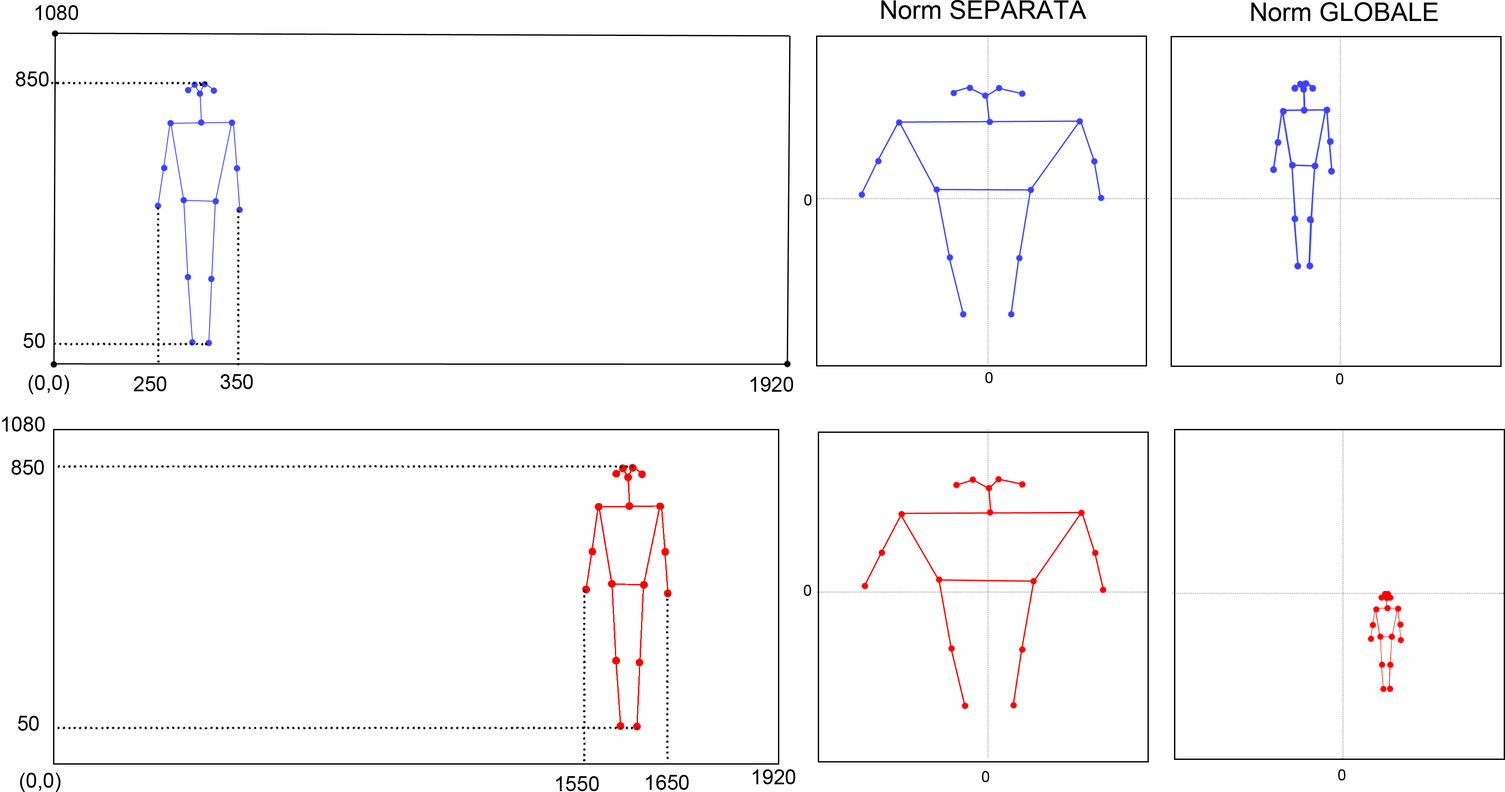
<style>
.page{position:relative;width:1505px;height:792px;background:#ffffff}
.page>*{position:absolute;margin:0}
.t1{font:20.6px "ArialMT";color:#000000}
.t2{font:25.7px "ArialMT";color:#000000}
.t3{font:15.4px "ArialMT";color:#000000}
</style>
<div class="page">
<p class="t1" style="left:36px;top:5px;width:42px;height:15px">1080</p>
<p class="t2" style="left:881px;top:0px;width:205px;height:19px">Norm SEPARATA</p>
<p class="t2" style="left:1251px;top:2px;width:187px;height:19px">Norm GLOBALE</p>
<p class="t1" style="left:16px;top:72px;width:33px;height:15px">850</p>
<p class="t3" style="left:804px;top:194px;width:8px;height:12px">0</p>
<p class="t1" style="left:24px;top:333px;width:21px;height:15px">50</p>
<p class="t1" style="left:29px;top:375px;width:40px;height:19px">(0,0)</p>
<p class="t1" style="left:134px;top:376px;width:33px;height:15px">250</p>
<p class="t1" style="left:221px;top:374px;width:32px;height:15px">350</p>
<p class="t1" style="left:751px;top:377px;width:42px;height:15px">1920</p>
<p class="t3" style="left:985px;top:372px;width:8px;height:11px">0</p>
<p class="t3" style="left:1336px;top:373px;width:8px;height:12px">0</p>
<p class="t1" style="left:2px;top:417px;width:43px;height:15px">1080</p>
<p class="t1" style="left:12px;top:460px;width:32px;height:15px">850</p>
<p class="t3" style="left:804px;top:585px;width:7px;height:11px">0</p>
<p class="t1" style="left:18px;top:716px;width:21px;height:15px">50</p>
<p class="t1" style="left:20px;top:773px;width:41px;height:19px">(0,0)</p>
<p class="t1" style="left:753px;top:770px;width:43px;height:15px">1920</p>
<p class="t3" style="left:982px;top:771px;width:8px;height:11px">0</p>
<p class="t3" style="left:1338px;top:770px;width:8px;height:11px">0</p>
<p class="t1" style="left:556px;top:776px;width:43px;height:15px">1550</p>
<p class="t1" style="left:646px;top:775px;width:43px;height:15px">1650</p>
</div>
